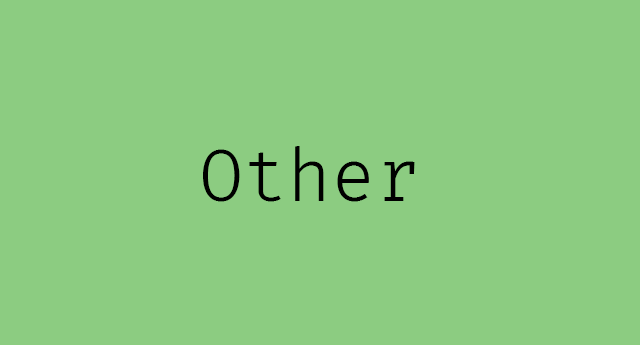
<style>
.page{position:relative;width:640px;height:345px;background:#8ccc81}
.page>*{position:absolute;margin:0}
.t1{font:72px "FiraCode-Light";color:#000000}
.t2{font:72px "FiraCode-Light"}
</style>
<div class="page">
<p class="t1" style="left:203px;top:146px;width:212px;height:56px">Other</p>
<p class="t2" style="left:207px;top:150px;width:207px;height:52px">React</p>
<p class="t2" style="left:243px;top:145px;width:127px;height:57px">Web</p>
</div>
